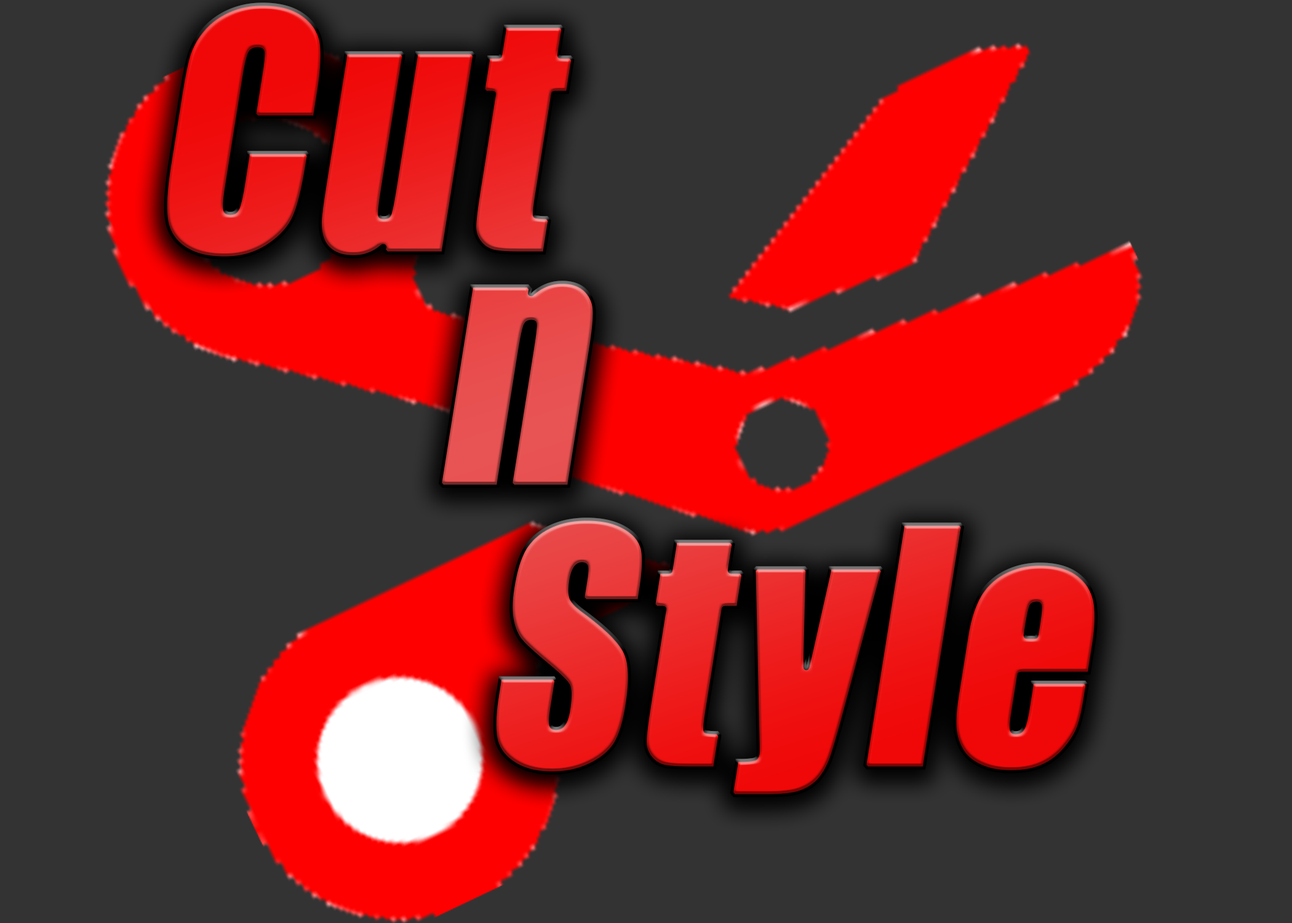
<style>
.page{position:relative;width:1292px;height:923px;background:#333333}
.page>*{position:absolute;margin:0}
.t1{font:303.5px "Impact";font-weight:bold;font-style:italic;scale:0.9 1}
</style>
<div class="page">
<p class="t1" style="left:164px;top:2px;width:934px;height:795px">Cut<br>            n<br>              Style</p>
</div>
